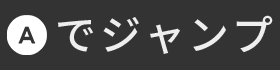
<style>
.page{position:relative;width:280px;height:70px;background:#333333}
.page>*{position:absolute;margin:0}
.t1{font:41px "SourceHanSansJP-Medium";letter-spacing:0.08em;color:#eeeeee}
</style>
<div class="page">
<p class="t1" style="left:58px;top:15px;width:215px;height:39px">でジャンプ</p>
</div>
